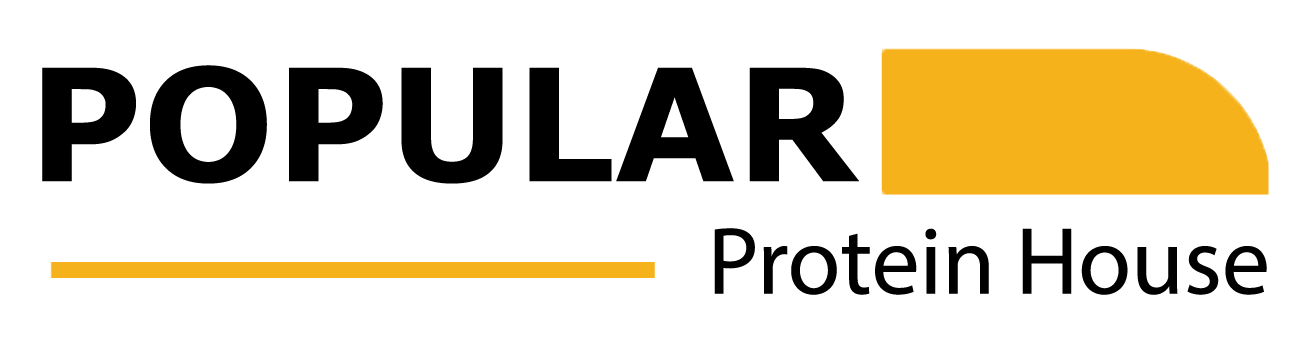
<style>
.page{position:relative;width:1311px;height:363px;background:#ffffff}
.page>*{position:absolute;margin:0}
.t1{font:155.8px "Verdana-Bold";color:#010000}
.t2{font:96px "MyriadPro-Regular";color:#000000}
</style>
<div class="page">
<p class="t1" style="left:42px;top:65px;width:817px;height:119px">POPULAR</p>
<p class="t2" style="left:714px;top:228px;width:553px;height:67px">Protein House</p>
</div>
